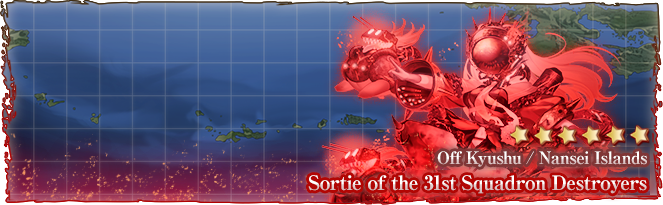
<style>
.page{position:relative;width:663px;height:205px}
.page>*{position:absolute;margin:0}
.t1{font:17px "RyuminPro-ExBold";letter-spacing:-0.04em}
.t2{font:20px "RyuminPro-ExBold";letter-spacing:-0.04em}
</style>
<div class="page">
<p class="t1" style="left:437px;top:151px;width:210px;height:16px">Off Kyushu / Nansei Islands</p>
<p class="t2" style="left:308px;top:175px;width:339px;height:19px">Sortie of the 31st Squadron Destroyers</p>
</div>
